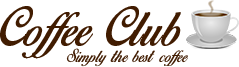
<style>
.page{position:relative;width:239px;height:67px;background:#ffffff}
.page>*{position:absolute;margin:0}
.t1{font:48px "BirdsofParadise";letter-spacing:0.025em;color:#411c01}
.t2{font:16px "BirdsofParadise";letter-spacing:0.025em;color:#411c01}
</style>
<div class="page">
<p class="t1" style="left:0px;top:6px;width:181px;height:53px">Coffee Club</p>
<p class="t2" style="left:66px;top:48px;width:122px;height:19px">Simply the best coffee</p>
</div>
